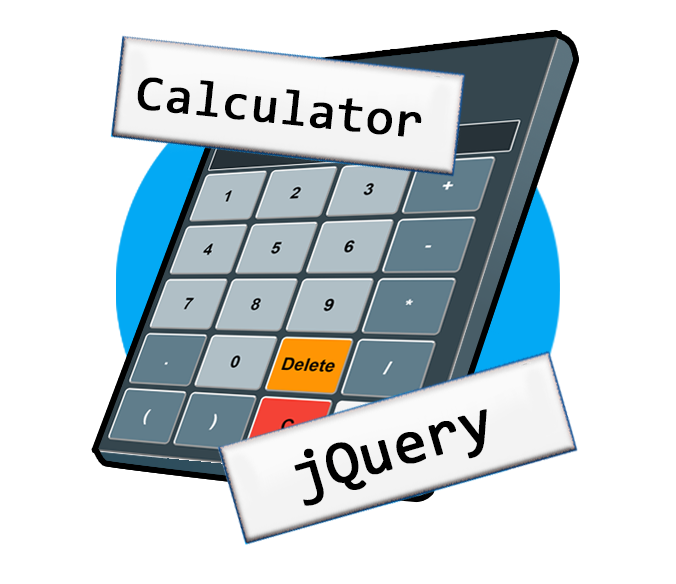
<style>
.page{position:relative;width:676px;height:584px;background:#ffffff}
.page>*{position:absolute;margin:0}
.t1{font:50px "Consolas";color:#000000;font-weight:bold}
.t2{font:60px "Consolas";color:#000000;font-weight:bold}
</style>
<div class="page">
<p class="t1" style="left:137px;top:77px;width:285px;height:60px;rotate:6deg">Calculator</p>
<p class="t2" style="left:294px;top:409px;width:193px;height:97px;rotate:-16deg">jQuery</p>
</div>
